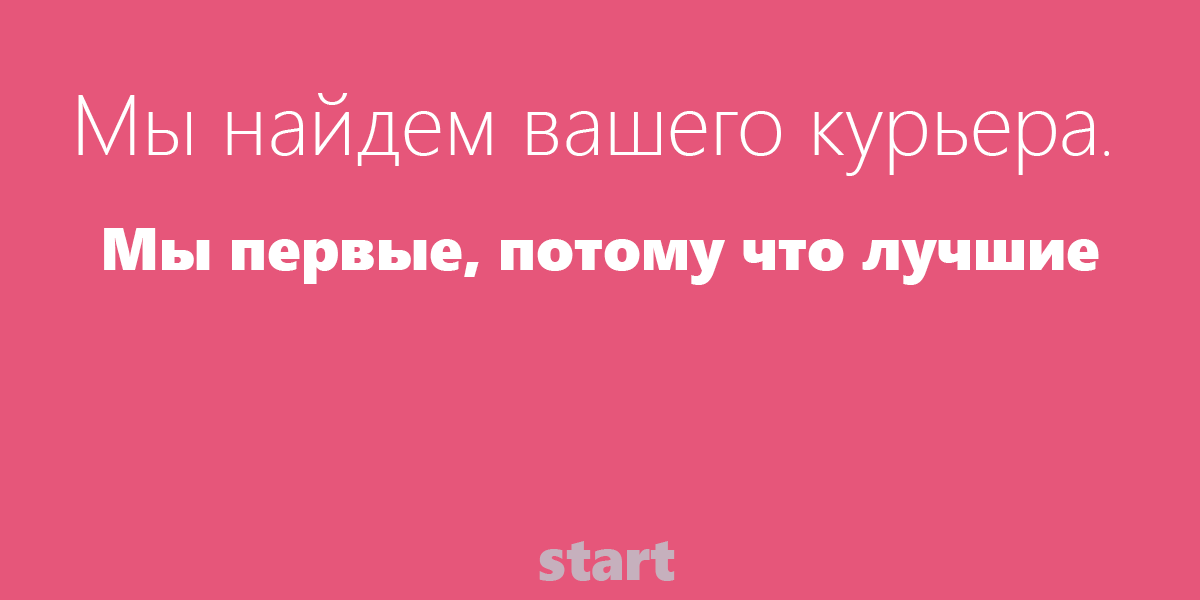
<style>
.page{position:relative;width:1200px;height:600px;background:#e6567a}
.page>*{position:absolute;margin:0}
.t1{font:85px "SegoeUI-Light";color:#ffffff}
.t2{font:60px "SegoeUI-Light";color:#ffffff}
.t3{font:60px "SegoeUIBlack";color:#ffffff}
.t4{font:60px "SegoeUIBlack";color:#c6b0bd}
</style>
<div class="page">
<p class="t1" style="left:78px;top:93px;width:1031px;height:83px">Мы найдем вашего курьера<span class="t2">.</span></p>
<p class="t3" style="left:104px;top:228px;width:995px;height:57px">Мы первые, потому что лучшие</p>
<p class="t4" style="left:539px;top:541px;width:136px;height:40px">start</p>
</div>
